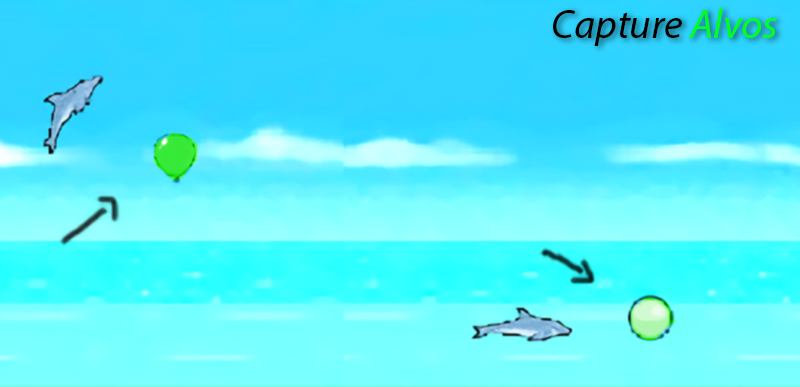
<style>
.page{position:relative;width:800px;height:387px}
.page>*{position:absolute;margin:0}
.t1{font:30.8px "MyriadPro-It";color:#000000}
.t2{font:30.8px "MyriadPro-It";color:#00ff1e}
</style>
<div class="page">
<p class="t1" style="left:553px;top:8px;width:224px;height:38px">Capture <span class="t2">Alvos</span></p>
</div>
